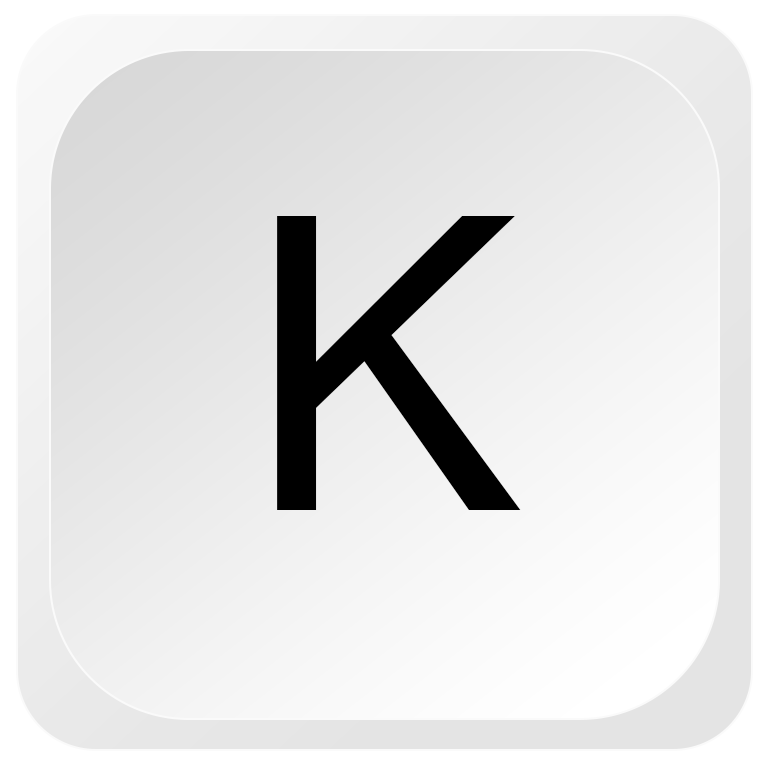
<style>
.page{position:relative;width:768px;height:768px}
.page>*{position:absolute;margin:0}
.t1{font:411px "ArialMT";color:#000000}
</style>
<div class="page">
<p class="t1" style="left:277px;top:216px;width:244px;height:294px">K</p>
</div>
